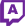
<style>
.page{position:relative;width:25px;height:26px;background:#ffffff}
.page>*{position:absolute;margin:0}
.t1{font:13.5px "Arial-Black";color:#6c2498}
</style>
<div class="page">
<p class="t1" style="left:7px;top:4px;width:11px;height:10px">A</p>
</div>
